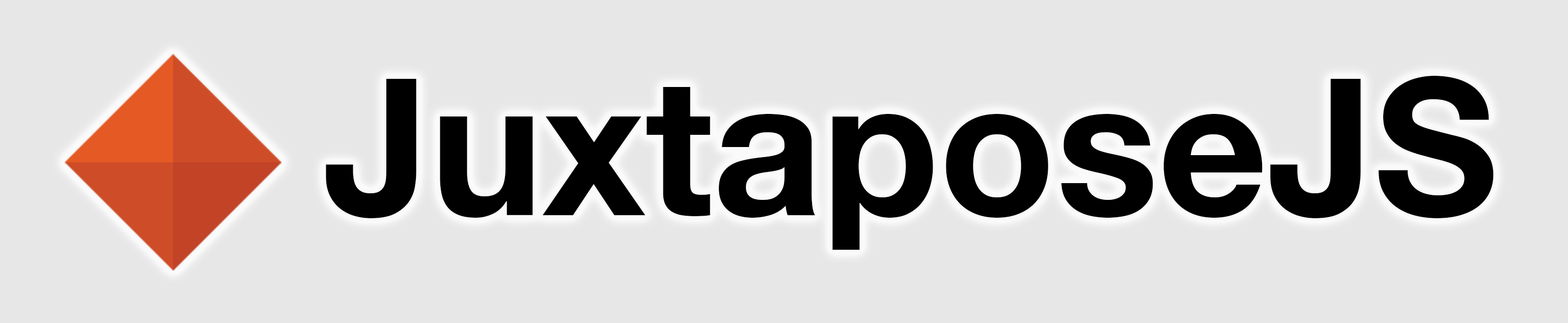
<style>
.page{position:relative;width:1568px;height:323px;background:#e7e7e7}
.page>*{position:absolute;margin:0}
.t1{font:191px "HelveticaNeue-Bold";color:#000000}
</style>
<div class="page">
<p class="t1" style="left:326px;top:76px;width:1168px;height:174px">JuxtaposeJS</p>
</div>
